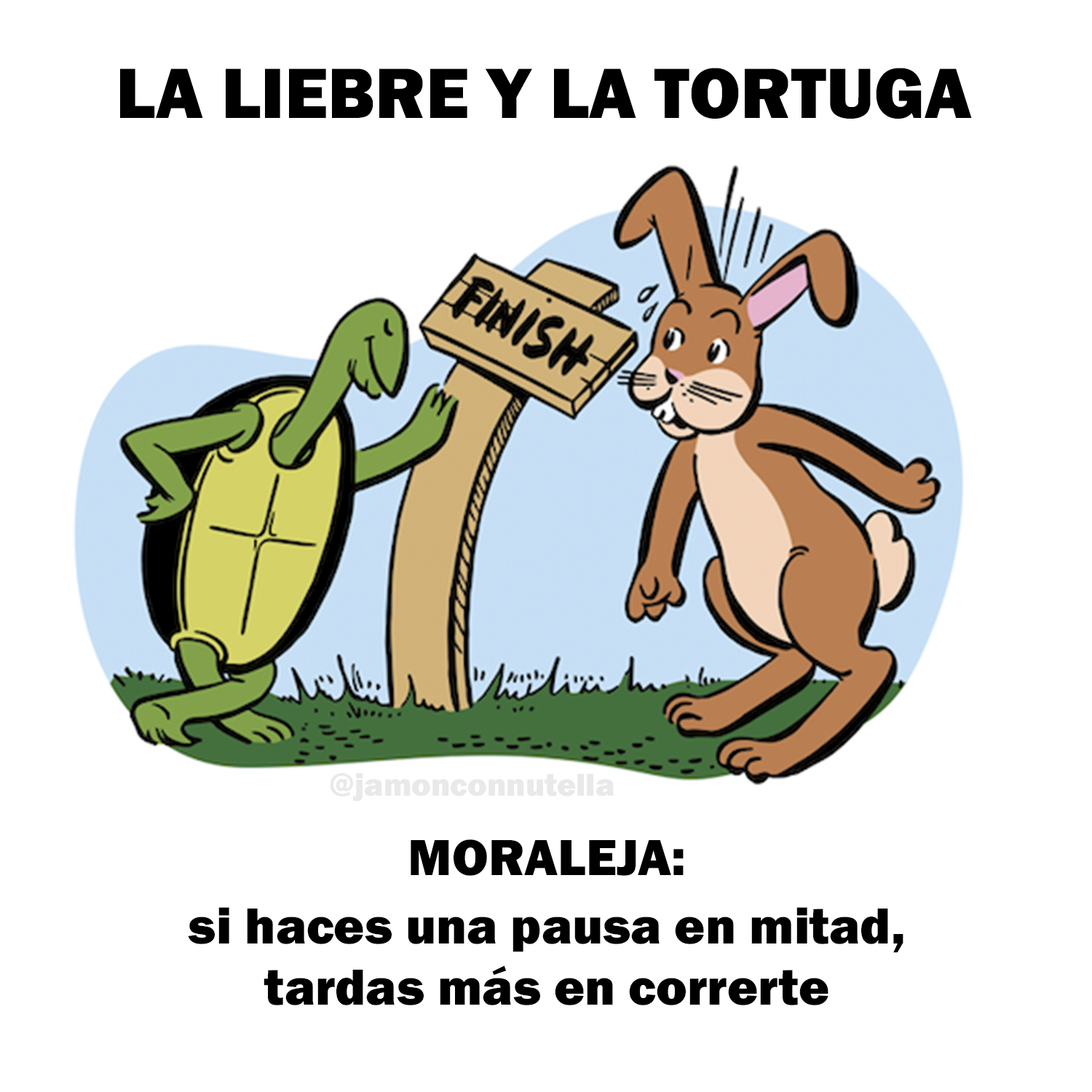
<style>
.page{position:relative;width:1092px;height:1092px;background:#ffffff}
.page>*{position:absolute;margin:0}
.t1{font:73.8px "FranklinGothic-Heavy";color:#000000}
.t2{font:32.8px "FranklinGothic-Heavy";color:#e9e9e9}
.t3{font:52.4px "FranklinGothic-Heavy";color:#000000}
</style>
<div class="page">
<p class="t1" style="left:120px;top:68px;width:852px;height:51px">LA LIEBRE Y LA TORTUGA</p>
<p class="t2" style="left:330px;top:773px;width:284px;height:29px">@jamonconnutella</p>
<p class="t3" style="left:188px;top:839px;width:715px;height:166px;text-align:center">MORALEJA:<br>si haces una pausa en mitad,<br>tardas más en correrte</p>
</div>
